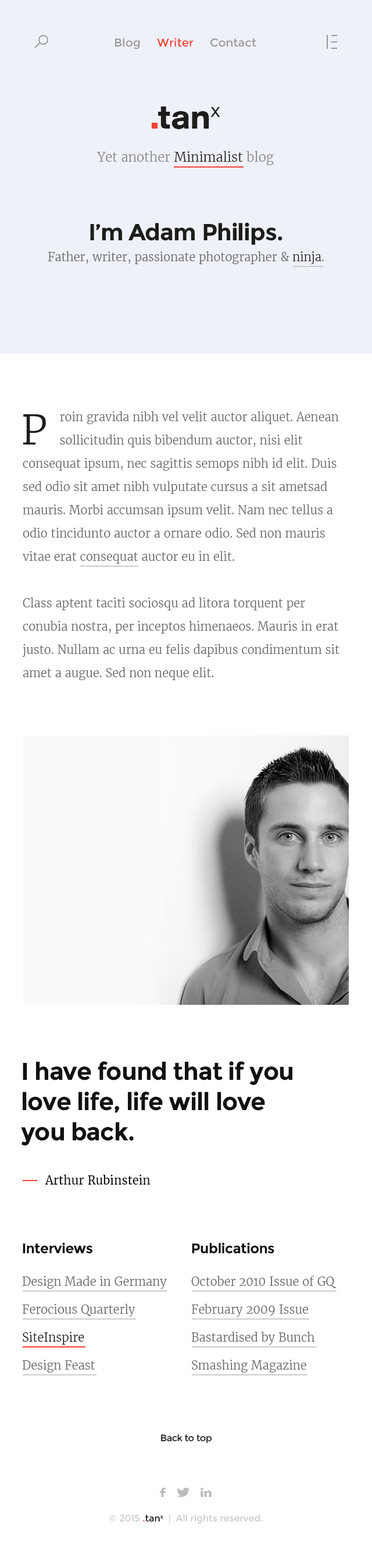
<style>
.page{position:relative;width:372px;height:1568px;background:#ffffff}
.page>*{position:absolute;margin:0}
.t1{font:11.4px "Montserrat-Regular";color:#999999}
.t2{font:11.4px "Montserrat-Regular";color:#f44336}
.t3{font:12.8px "MerriweatherLight";color:#888888}
.t4{font:12.8px "MerriweatherLight";color:#1d1d1b}
.t5{font:23.3px "Montserrat-Bold";letter-spacing:-0.025em;color:#1d1d1b}
.t6{font:11.6px "MerriweatherLight";color:#666666}
.t7{font:11.6px "MerriweatherLight";color:#1d1d1b}
.t8{font:11.6px/23.3px "MerriweatherLight";color:#666666}
.t9{font:40.7px "MerriweatherLight";color:#1d1d1b}
.t10{font:24.4px/30.3px "Montserrat-Bold";letter-spacing:-0.025em;color:#111111}
.t11{font:11.6px "Merriweather-Regular";color:#111111}
.t12{font:14px "Montserrat-Bold";letter-spacing:-0.025em;color:#111111}
.t13{font:11.6px/27.9px "MerriweatherLight";color:#666666}
.t14{font:11.6px/27.9px "MerriweatherLight";color:#111111}
.t15{font:9.3px "Montserrat-Regular";letter-spacing:-0.025em;color:#111111}
.t16{font:10.5px "Zocial-Regular";color:#bbbbbb}
.t17{font:9.3px "Montserrat-Regular";color:#cccccc}
.t18{font:9.3px "Montserrat-Regular";color:#f44336}
.t19{font:9.3px "Montserrat-Regular";color:#111111}
</style>
<div class="page">
<p class="t1" style="left:115px;top:38px;width:25px;height:11px">Blog</p>
<p class="t2" style="left:157px;top:38px;width:37px;height:9px">Writer</p>
<p class="t1" style="left:211px;top:38px;width:46px;height:9px">Contact</p>
<p class="t3" style="left:97px;top:151px;width:177px;height:14px">Yet another <span class="t4">Minimalist</span> blog</p>
<p class="t5" style="left:90px;top:222px;width:193px;height:23px">I’m Adam Philips.</p>
<p class="t6" style="left:48px;top:251px;width:276px;height:13px">Father, writer, passionate photographer &amp; <span class="t7">ninja</span>.</p>
<p class="t8" style="left:22px;top:411px;width:318px;height:269px">roin gravida nibh vel velit auctor aliquet. Aenean <br>           sollicitudin quis bibendum auctor, nisi elit <br>consequat ipsum, nec sagittis semops nibh id elit. Duis sed odio sit amet nibh vulputate cursus a sit ametsad mauris. Morbi accumsan ipsum velit. Nam nec tellus a odio tincidunto auctor a ornare odio. Sed non mauris vitae erat consequat auctor eu in elit. <br><br>Class aptent taciti sociosqu ad litora torquent per <br>conubia nostra, per inceptos himenaeos. Mauris in erat justo. Nullam ac urna eu felis dapibus condimentum sit amet a augue. Sed non neque elit.</p>
<p class="t9" style="left:23px;top:414px;width:23px;height:31px">P</p>
<p class="t10" style="left:21px;top:1061px;width:272px;height:85px">I have found that if you <br>love life, life will love <br>you back.</p>
<p class="t11" style="left:45px;top:1174px;width:106px;height:11px">Arthur Rubinstein</p>
<p class="t12" style="left:23px;top:1242px;width:70px;height:12px">Interviews</p>
<p class="t12" style="left:192px;top:1242px;width:83px;height:12px">Publications</p>
<p class="t13" style="left:22px;top:1276px;width:145px;height:97px">Design Made in Ger­many<br>Fero­cious Quar­terly<br><span class="t14">SiteIn­spire<br></span>Design Feast</p>
<p class="t13" style="left:191px;top:1276px;width:146px;height:97px">Octo­ber 2010 Issue of GQ<br>Feb­ru­ary 2009 Issue<br>Bas­tardised by Bunch<br>Smash­ing Magazine</p>
<p class="t15" style="left:161px;top:1434px;width:51px;height:9px">Back to top</p>
<p class="t16" style="left:159px;top:1488px;width:7px;height:9px">f</p>
<p class="t16" style="left:177px;top:1488px;width:13px;height:9px">T</p>
<p class="t16" style="left:201px;top:1488px;width:11px;height:9px">L</p>
<p class="t17" style="left:109px;top:1514px;width:154px;height:10px">© 2015 <span class="t18">.</span><span class="t19">tanx</span>  |  All rights reserved.</p>
</div>
